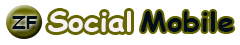
<style>
.page{position:relative;width:240px;height:45px;background:#ffffff}
.page>*{position:absolute;margin:0}
.t1{font:17px "ComicSansMS-Bold";color:#030e1b;scale:1.16 1}
.t2{font:26px "ComicSansMS-Bold";color:#f7f1f1;scale:1.16 1}
.t3{font:26px "ComicSansMS-Bold";color:#030e1b;scale:1.16 1}
</style>
<div class="page">
<p class="t1" style="left:12px;top:16px;width:26px;height:13px">ZF</p>
<p class="t2" style="left:48px;top:11px;width:83px;height:21px">Social</p>
<p class="t3" style="left:141px;top:11px;width:93px;height:21px">Mobile</p>
</div>
